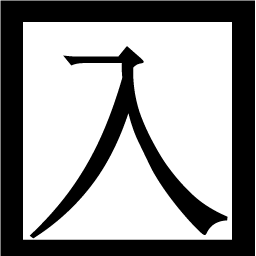
<style>
.page{position:relative;width:256px;height:256px;background:#ffffff}
.page>*{position:absolute;margin:0}
.t1{font:213.7px "STSongti-TC-Regular";letter-spacing:0.16em;color:#000000}
</style>
<div class="page">
<p class="t1" style="left:29px;top:46px;width:199px;height:193px">入</p>
</div>
